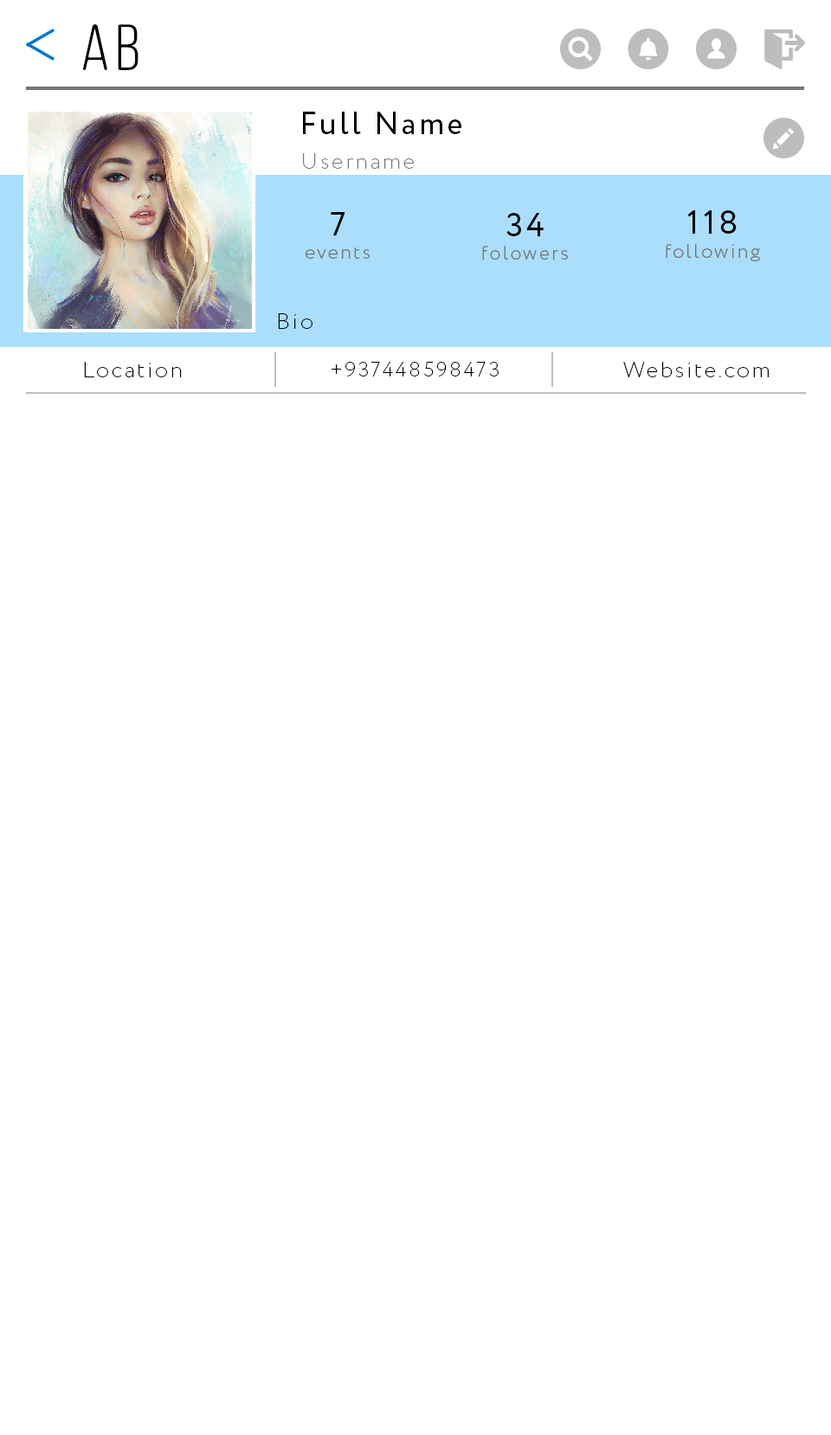
<style>
.page{position:relative;width:831px;height:1435px;background:#ffffff}
.page>*{position:absolute;margin:0}
.t1{font:65.4px "ClutchSans-Regular";letter-spacing:0.1em;color:#000000}
.t2{font:31.2px "Circe-Regular";letter-spacing:0.1em;color:#000000}
.t3{font:22.5px "Circe-ExtraLight";letter-spacing:0.1em;color:#757575}
.t4{font:19.9px "Circe-Light";letter-spacing:0.1em;color:#757575}
.t5{font:32.9px "Circe-Regular";letter-spacing:0.1em;color:#000000}
.t6{font:22.5px "Circe-ExtraLight";letter-spacing:0.1em;color:#000000}
.t7{font:20.8px "Circe-ExtraLight";letter-spacing:0.1em;color:#000000}
</style>
<div class="page">
<p class="t1" style="left:83px;top:24px;width:55px;height:46px">Ab</p>
<p class="t2" style="left:303px;top:112px;width:158px;height:22px">Full Name</p>
<p class="t3" style="left:303px;top:153px;width:111px;height:16px">Username</p>
<p class="t4" style="left:306px;top:212px;width:64px;height:47px;text-align:center"><span class="t5">7<br></span>events</p>
<p class="t4" style="left:482px;top:213px;width:86px;height:47px;text-align:center"><span class="t5">34<br></span>folowers</p>
<p class="t4" style="left:666px;top:210px;width:94px;height:51px;text-align:center"><span class="t5">118<br></span>following</p>
<p class="t6" style="left:278px;top:313px;width:34px;height:16px">Bio</p>
<p class="t6" style="left:84px;top:362px;width:98px;height:15px">Location</p>
<p class="t7" style="left:332px;top:362px;width:167px;height:15px">+937448598473</p>
<p class="t6" style="left:623px;top:362px;width:146px;height:15px">Website.com</p>
</div>
